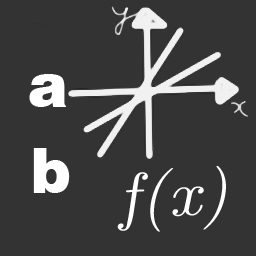
<style>
.page{position:relative;width:256px;height:256px;background:#333333}
.page>*{position:absolute;margin:0}
.t1{font:60px "HelveticaBlack";color:#ffffff}
.t2{font:63.1px "CMUClassicalSerif-Italic";color:#ffffff;scale:1.11 1}
</style>
<div class="page">
<p class="t1" style="left:29px;top:74px;width:37px;height:33px">a</p>
<p class="t1" style="left:33px;top:148px;width:37px;height:45px">b</p>
<p class="t2" style="left:117px;top:165px;width:109px;height:67px;rotate:-3deg">f(x)</p>
</div>
